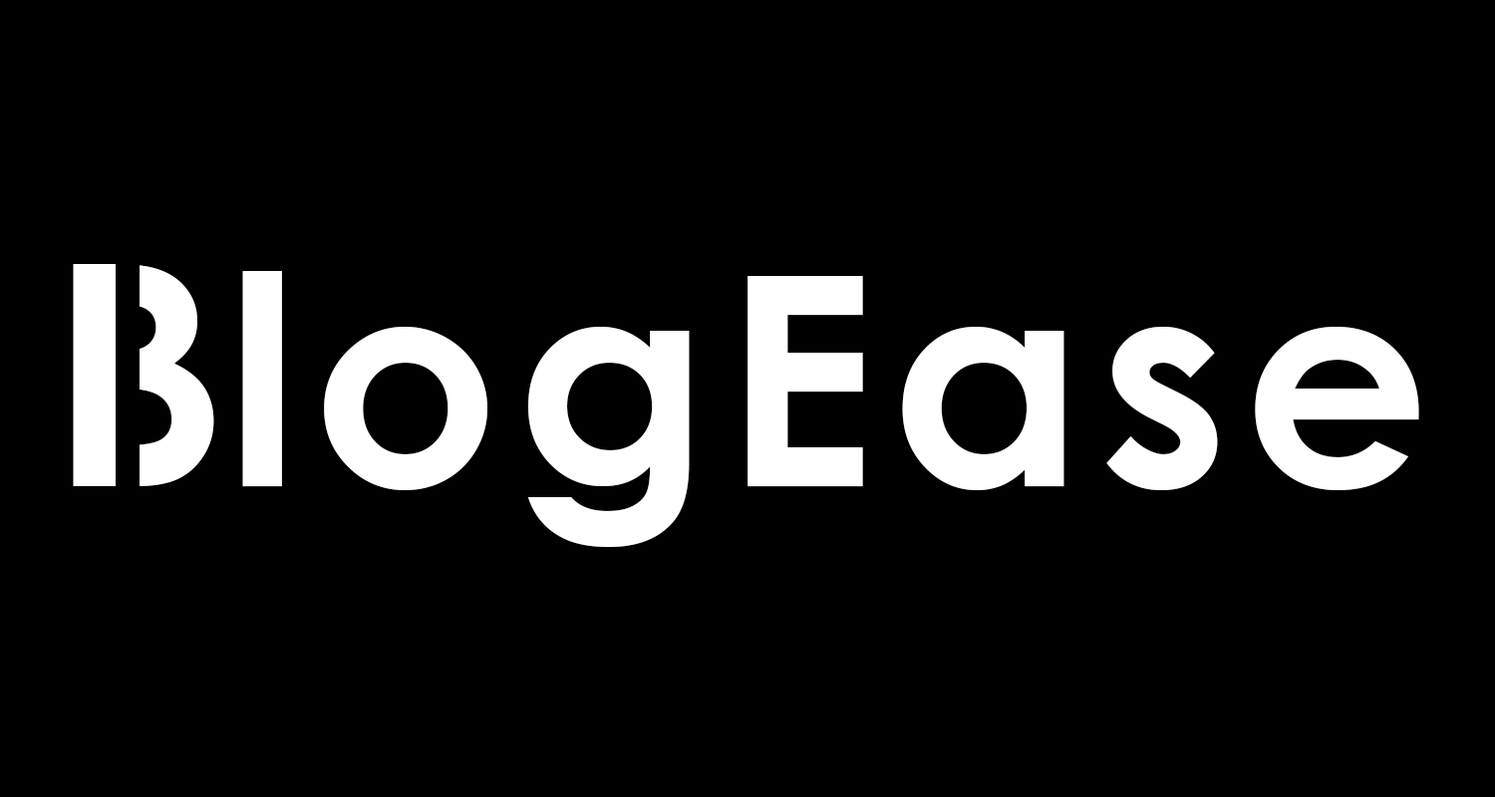
<style>
.page{position:relative;width:1495px;height:797px;background:#000000}
.page>*{position:absolute;margin:0}
.t1{font:310.3px "CenturyGothic-Bold";letter-spacing:0.05em;color:#ffffff}
.t2{font:293.1px "CenturyGothic-Bold";letter-spacing:0.05em;color:#ffffff}
</style>
<div class="page">
<p class="t1" style="left:73px;top:264px;width:141px;height:222px">B</p>
<p class="t2" style="left:242px;top:271px;width:1178px;height:276px">logEase</p>
</div>
